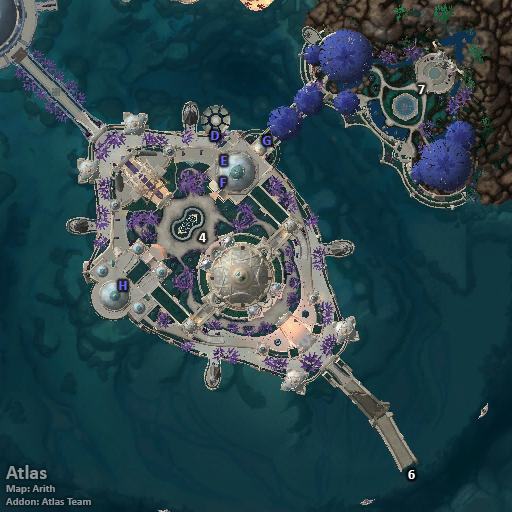
<style>
.page{position:relative;width:512px;height:512px}
.page>*{position:absolute;margin:0}
.t1{font:14px "Calibri-Bold";color:#ffffff}
.t2{font:14px "Calibri-Bold";color:#6666ff}
.t3{font:11px "Calibri-Bold";color:#8f969a}
.t4{font:20px "Calibri-Bold";color:#8f969a}
</style>
<div class="page">
<p class="t1" style="left:418px;top:85px;width:7px;height:9px">7</p>
<p class="t2" style="left:211px;top:131px;width:8px;height:9px">D</p>
<p class="t2" style="left:262px;top:136px;width:9px;height:9px">G</p>
<p class="t2" style="left:221px;top:156px;width:6px;height:9px">E</p>
<p class="t2" style="left:220px;top:178px;width:6px;height:9px">F</p>
<p class="t1" style="left:199px;top:233px;width:7px;height:9px">4</p>
<p class="t2" style="left:119px;top:281px;width:8px;height:9px">H</p>
<p class="t3" style="left:6px;top:465px;width:85px;height:40px"><span class="t4">Atlas<br></span>Map: Arith<br>Addon: Atlas Team</p>
<p class="t1" style="left:408px;top:470px;width:7px;height:9px">6</p>
</div>
